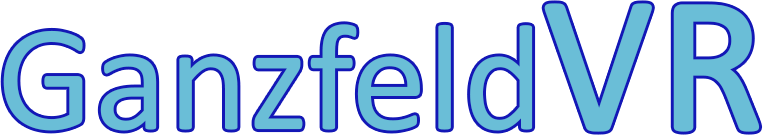
<style>
.page{position:relative;width:763px;height:135px;background:#ffffff}
.page>*{position:absolute;margin:0}
.t1{font:153.3px "Calibri";color:#6abed7}
.t2{font:195.1px "Calibri";color:#6abed7;font-weight:bold}
</style>
<div class="page">
<p class="t1" style="left:3px;top:3px;width:757px;height:129px">Ganzfeld<span class="t2">VR</span></p>
</div>
